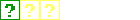
<style>
.page{position:relative;width:140px;height:20px;background:#ffffff}
.page>*{position:absolute;margin:0}
.t1{font:22px "Onesize";color:#009900;scale:0.91 1}
.t2{font:22px "Onesize";color:#ffff66;scale:0.91 1}
</style>
<div class="page">
<p class="t1" style="left:5px;top:4px;width:10px;height:13px">?</p>
<p class="t2" style="left:25px;top:4px;width:10px;height:13px">?</p>
</div>
